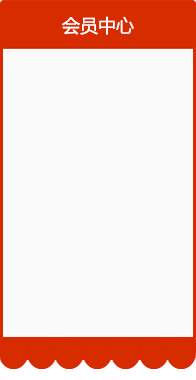
<style>
.page{position:relative;width:196px;height:380px;background:#fafafa}
.page>*{position:absolute;margin:0}
.t1{font:18px "MicrosoftYaHei";color:#ffffff}
</style>
<div class="page">
<p class="t1" style="left:62px;top:16px;width:72px;height:19px">会员中心</p>
</div>
